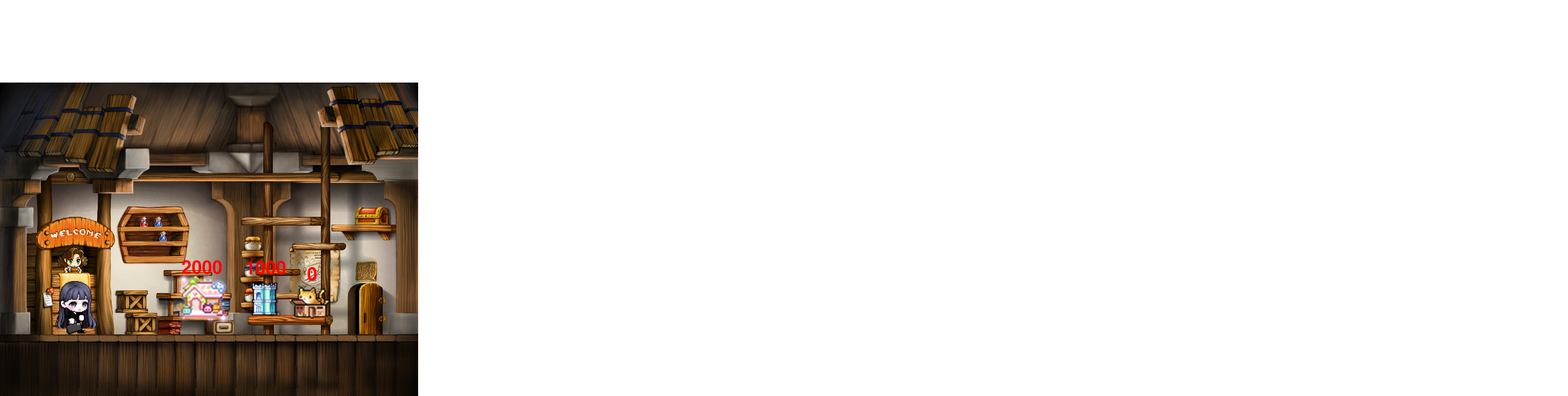
<style>
.page{position:relative;width:1568px;height:396px;background:#ffffff}
.page>*{position:absolute;margin:0}
.t1{font:17.4px "H2gtrE";letter-spacing:-0.033em;color:#ff0000}
</style>
<div class="page">
<p class="t1" style="left:182px;top:260px;width:40px;height:14px">2000</p>
<p class="t1" style="left:247px;top:261px;width:39px;height:14px">1000</p>
<p class="t1" style="left:307px;top:267px;width:10px;height:14px">0</p>
</div>
